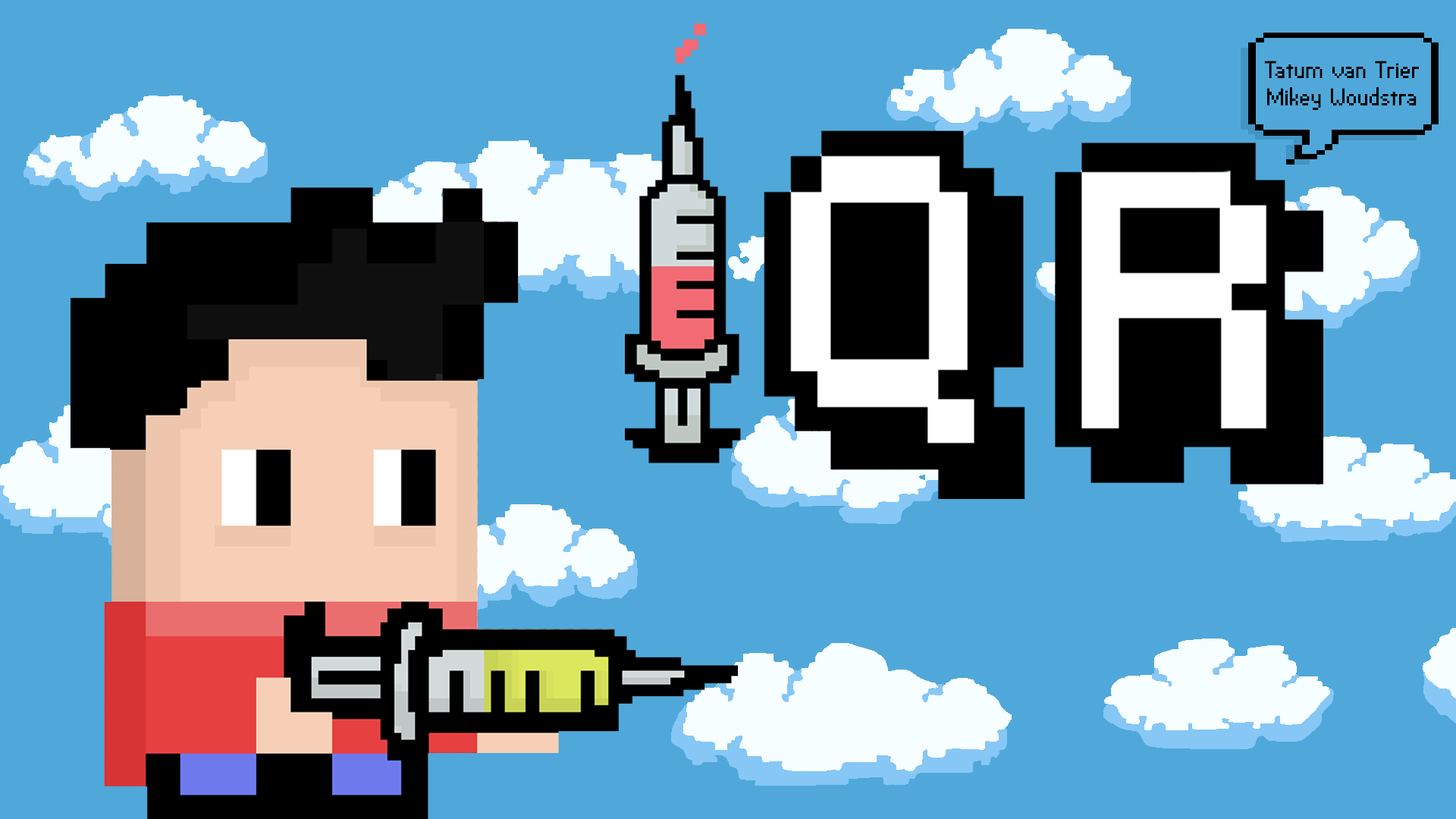
<style>
.page{position:relative;width:1456px;height:819px;background:#50a8da}
.page>*{position:absolute;margin:0}
.t1{font:22.7px "VPPixel-Simplified";color:#000000}
</style>
<div class="page">
<p class="t1" style="left:1264px;top:61px;width:155px;height:49px;text-align:center">Tatum van Trier<br>Mikey Woudstra</p>
</div>
